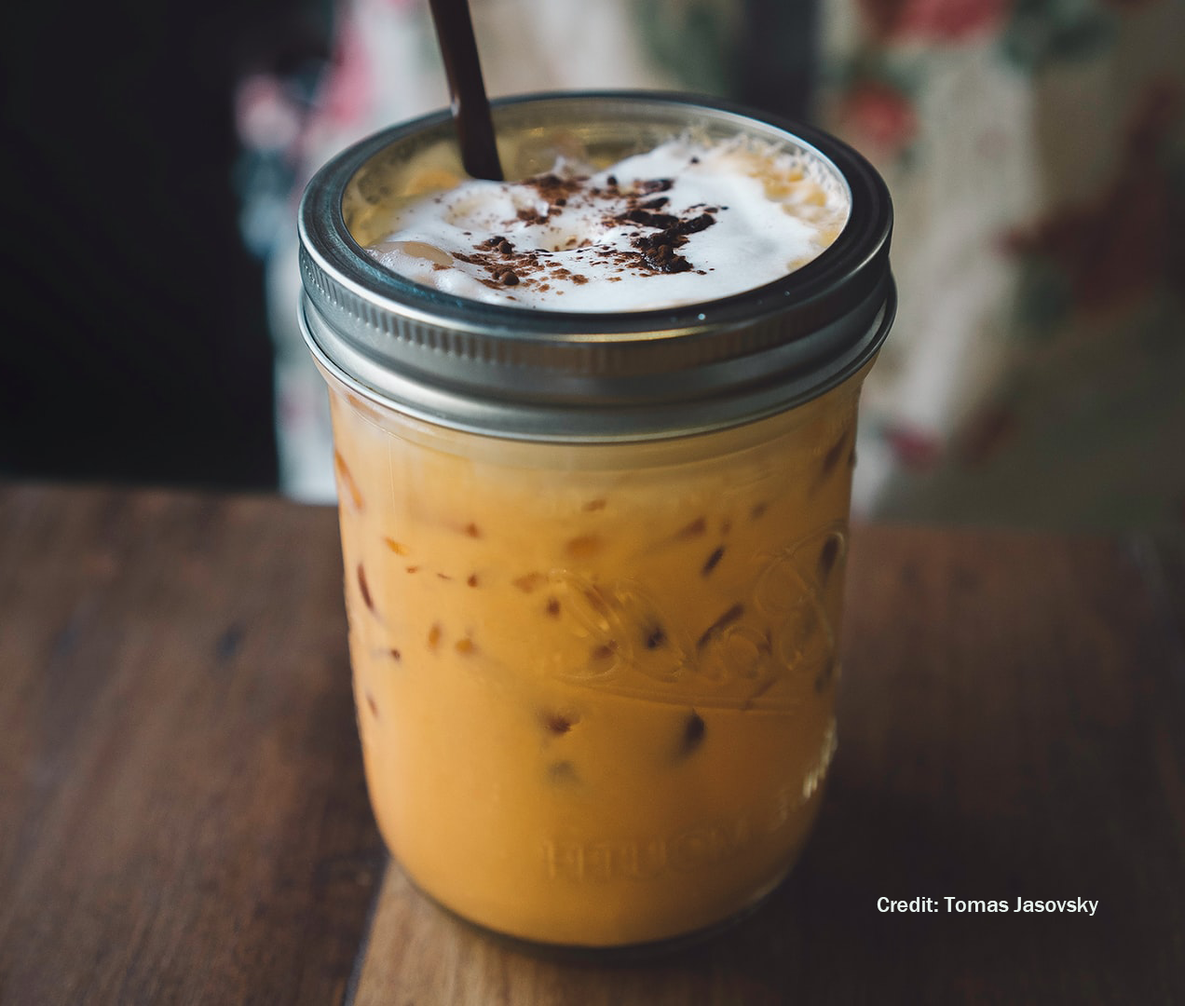
<style>
.page{position:relative;width:1185px;height:1006px}
.page>*{position:absolute;margin:0}
.t1{font:22.4px "FranklinGothic-Medium";color:#e8f2ee}
</style>
<div class="page">
<p class="t1" style="left:877px;top:897px;width:221px;height:19px">Credit: Tomas Jasovsky</p>
</div>
